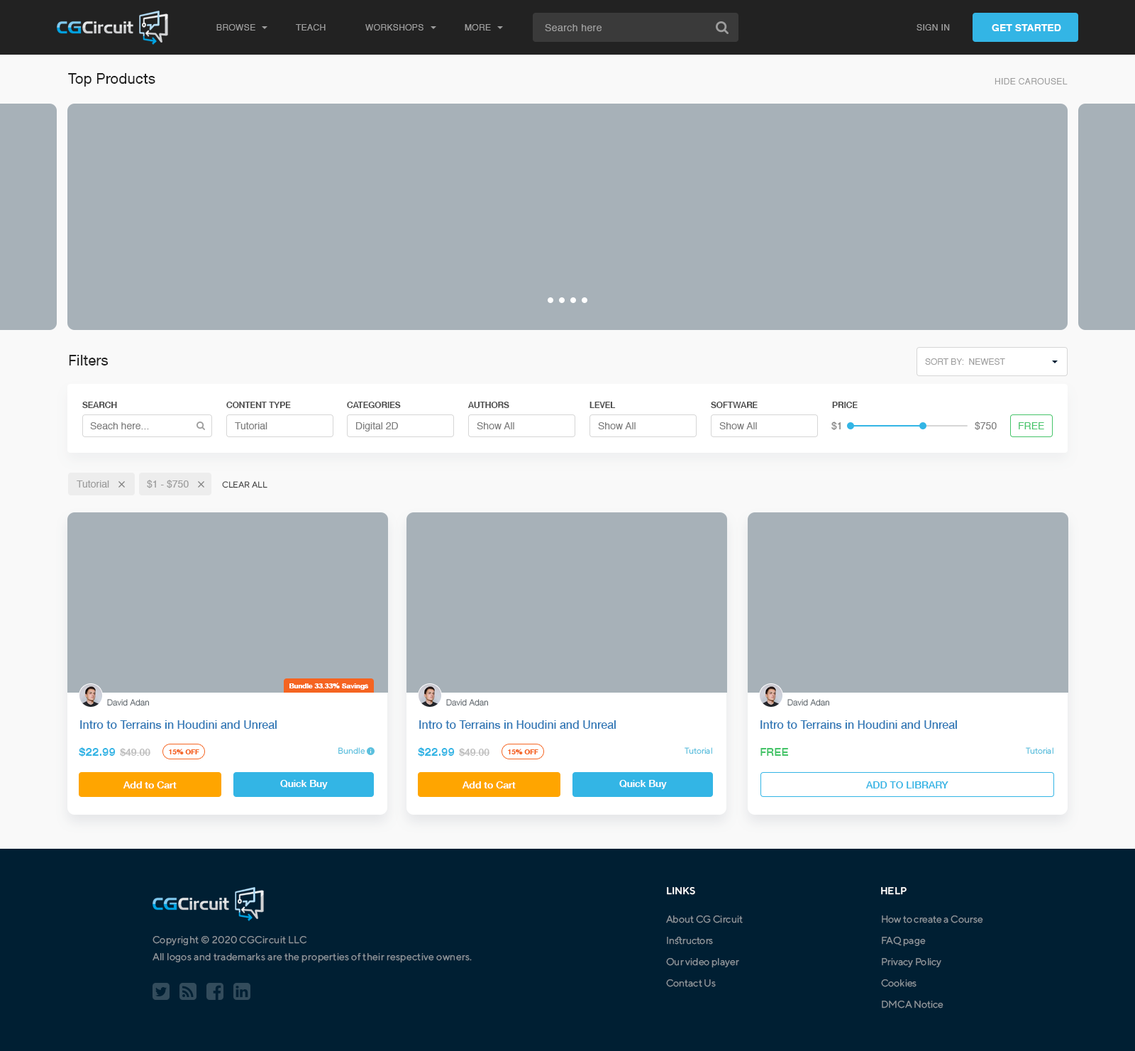
<style>
.page{position:relative;width:1135px;height:1051px;background:#a7b1b8}
.page>*{position:absolute;margin:0}
.t1{font:8.5px "Helvetica";letter-spacing:0.03em;color:#9d9d9d;text-transform:uppercase}
.t2{font:9.9px "Helvetica";letter-spacing:0.03em;color:#9d9d9d}
.t3{font:9.9px "Helvetica-Bold";color:#ffffff;text-transform:uppercase}
.t4{font:14.2px "HelveticaNeue-Medium";color:#222222}
.t5{font:8.5px "Helvetica";color:#9d9d9d;text-transform:uppercase}
.t6{font:8.5px "HelveticaNeue-Medium";color:#4b4b4b;text-transform:uppercase}
.t7{font:9.9px "Helvetica";color:#7e7e7e}
.t8{font:9.9px "Helvetica";color:#45c469}
.t9{font:9.9px "Helvetica";color:#9d9d9d}
.t10{font:8.5px "TTNorms-Regular";color:#464646;text-transform:uppercase}
.t11{font:7.1px "HelveticaNeue-Medium";letter-spacing:0.01em;color:#ffffff}
.t12{font:8.5px "HelveticaNeue-Light";color:#515b62}
.t13{font:11.4px "HelveticaNeue-Medium";color:#337ab7}
.t14{font:10.6px "HelveticaNeue-Heavy";color:#33b5e5}
.t15{font:9.9px "HelveticaNeue-Medium";color:#bdbdbd}
.t16{font:7.1px "HelveticaNeue-Medium";color:#f56421}
.t17{font:8.5px "TTNorms-Regular";color:#5bc0de}
.t18{font:10.6px "HelveticaNeue-Heavy";color:#45c469}
.t19{font:9.9px "HelveticaNeue-Medium";color:#ffffff}
.t20{font:9.9px "HelveticaNeue-Medium";color:#33b5e5}
.t21{font:9.9px "TTNorms-Medium";color:#ffffff;text-transform:uppercase}
.t22{font:9.9px/21.3px "TTNorms-Regular";color:#8d949a}
.t23{font:9.9px/17px "TTNorms-Regular";letter-spacing:0.02em;color:#8d949a}
</style>
<div class="page">
<p class="t1" style="left:216px;top:24px;width:39px;height:7px">Browse</p>
<p class="t1" style="left:296px;top:24px;width:30px;height:7px">teach</p>
<p class="t1" style="left:365px;top:24px;width:59px;height:7px">workshops</p>
<p class="t1" style="left:465px;top:24px;width:26px;height:7px">More</p>
<p class="t2" style="left:545px;top:24px;width:57px;height:7px">Search here</p>
<p class="t1" style="left:917px;top:24px;width:33px;height:7px">Sign in</p>
<p class="t3" style="left:992px;top:24px;width:69px;height:7px">Get Started</p>
<p class="t4" style="left:68px;top:73px;width:87px;height:14px">Top Products</p>
<p class="t1" style="left:995px;top:78px;width:73px;height:6px">hide carousel</p>
<p class="t4" style="left:69px;top:355px;width:39px;height:10px">Filters</p>
<p class="t5" style="left:925px;top:358px;width:80px;height:7px">Sort By:  Newest</p>
<p class="t6" style="left:82px;top:402px;width:35px;height:6px">search</p>
<p class="t6" style="left:226px;top:402px;width:65px;height:6px">Content type</p>
<p class="t6" style="left:347px;top:402px;width:54px;height:6px">CATEGORIES</p>
<p class="t6" style="left:467px;top:402px;width:42px;height:6px">AUTHORS</p>
<p class="t6" style="left:589px;top:402px;width:27px;height:6px">LEVEL</p>
<p class="t6" style="left:711px;top:402px;width:47px;height:6px">SOFTWARE</p>
<p class="t6" style="left:832px;top:402px;width:26px;height:6px">price</p>
<p class="t7" style="left:90px;top:422px;width:59px;height:7px">Seach here...</p>
<p class="t7" style="left:235px;top:422px;width:32px;height:7px">Tutorial</p>
<p class="t7" style="left:356px;top:422px;width:42px;height:9px">Digital 2D</p>
<p class="t7" style="left:477px;top:422px;width:37px;height:7px">Show All</p>
<p class="t7" style="left:598px;top:422px;width:38px;height:7px">Show All</p>
<p class="t7" style="left:719px;top:422px;width:38px;height:7px">Show All</p>
<p class="t7" style="left:831px;top:421px;width:10px;height:9px">$1</p>
<p class="t7" style="left:975px;top:421px;width:22px;height:9px">$750</p>
<p class="t8" style="left:1019px;top:422px;width:25px;height:7px">FREE</p>
<p class="t9" style="left:77px;top:480px;width:32px;height:7px">Tutorial</p>
<p class="t9" style="left:147px;top:480px;width:42px;height:8px">$1 - $750</p>
<p class="t10" style="left:222px;top:481px;width:45px;height:7px">Clear All</p>
<p class="t11" style="left:289px;top:682px;width:80px;height:8px">Bundle 33.33% Savings</p>
<p class="t12" style="left:107px;top:699px;width:42px;height:7px">David Adan</p>
<p class="t12" style="left:446px;top:699px;width:42px;height:7px">David Adan</p>
<p class="t12" style="left:787px;top:699px;width:42px;height:7px">David Adan</p>
<p class="t13" style="left:80px;top:720px;width:197px;height:9px">Intro to Terrains in Houdini and Unreal</p>
<p class="t13" style="left:419px;top:720px;width:197px;height:9px">Intro to Terrains in Houdini and Unreal</p>
<p class="t13" style="left:760px;top:720px;width:197px;height:9px">Intro to Terrains in Houdini and Unreal</p>
<p class="t14" style="left:79px;top:746px;width:37px;height:11px">$22.99</p>
<p class="t15" style="left:120px;top:748px;width:31px;height:8px">$49.00</p>
<p class="t16" style="left:169px;top:748px;width:30px;height:6px">15% OFF</p>
<p class="t17" style="left:338px;top:747px;width:27px;height:7px">Bundle</p>
<p class="t14" style="left:418px;top:746px;width:37px;height:11px">$22.99</p>
<p class="t15" style="left:459px;top:748px;width:31px;height:8px">$49.00</p>
<p class="t16" style="left:508px;top:748px;width:30px;height:6px">15% OFF</p>
<p class="t17" style="left:685px;top:747px;width:27px;height:7px">Tutorial</p>
<p class="t18" style="left:760px;top:748px;width:28px;height:7px">FREE</p>
<p class="t17" style="left:1026px;top:747px;width:27px;height:7px">Tutorial</p>
<p class="t19" style="left:123px;top:781px;width:54px;height:7px">Add to Cart</p>
<p class="t19" style="left:280px;top:780px;width:48px;height:9px">Quick Buy</p>
<p class="t19" style="left:462px;top:781px;width:54px;height:7px">Add to Cart</p>
<p class="t19" style="left:619px;top:780px;width:48px;height:9px">Quick Buy</p>
<p class="t20" style="left:865px;top:781px;width:83px;height:7px">ADD TO LIBRARY</p>
<p class="t21" style="left:667px;top:887px;width:28px;height:8px">Links</p>
<p class="t21" style="left:881px;top:887px;width:26px;height:8px">Help</p>
<p class="t22" style="left:666px;top:915px;width:77px;height:72px">About CG Circuit<br>Instructors<br>Our video player<br>Contact Us</p>
<p class="t22" style="left:881px;top:915px;width:102px;height:93px">How to create a Course<br>FAQ page<br>Privacy Policy<br>Cookies<br>DMCA Notice</p>
<p class="t23" style="left:153px;top:936px;width:319px;height:27px">Copyright © 2020 CGCircuit LLC<br>All logos and trademarks are the properties of their respective owners.</p>
</div>
